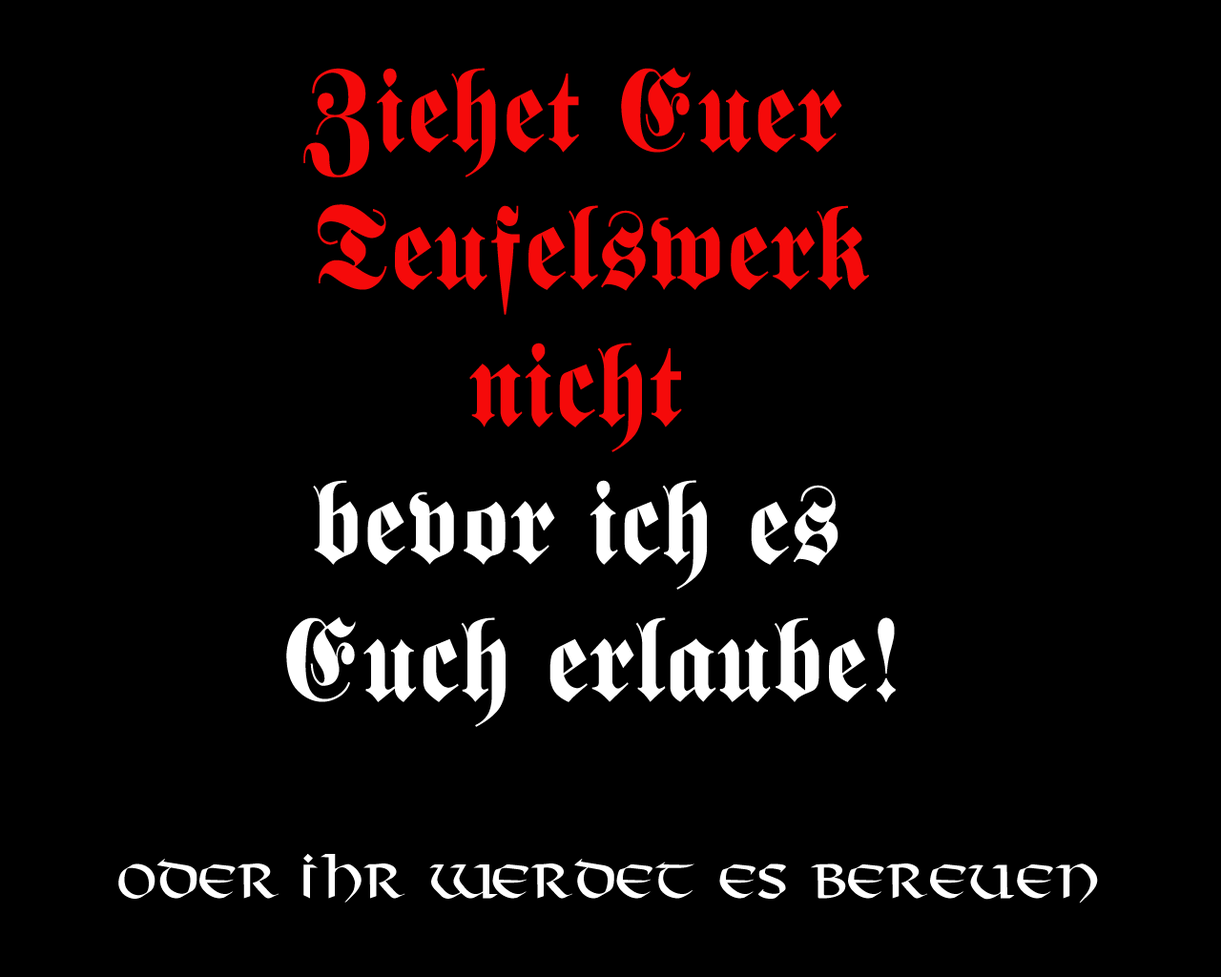
<style>
.page{position:relative;width:1221px;height:977px;background:#000000}
.page>*{position:absolute;margin:0}
.t1{font:114.5px "Frankenstein-Normal";color:#f50a0a;scale:0.9 1}
.t2{font:114.5px "Frankenstein-Normal";color:#ffffff;scale:0.9 1}
.t3{font:45.8px "VikingPlain";color:#ffffff}
</style>
<div class="page">
<p class="t1" style="left:286px;top:67px;width:610px;height:660px;text-align:center">Ziehet Euer <br>Teufelswerk<br>nicht<span class="t2"> <br>bevor ich es <br>Euch erlaube!</span></p>
<p class="t3" style="left:118px;top:854px;width:980px;height:49px">Oder Ihr werdet es bereuen</p>
</div>
